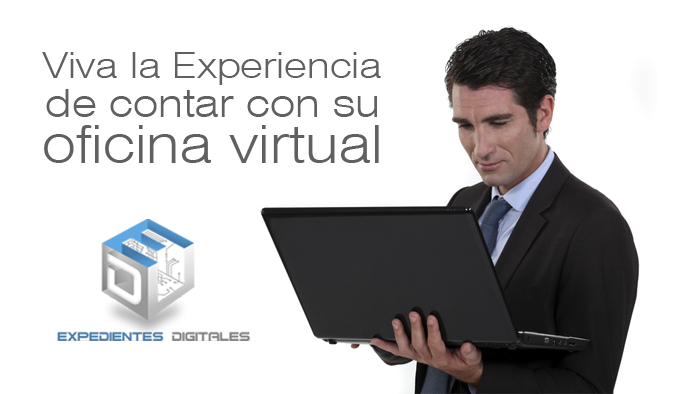
<style>
.page{position:relative;width:700px;height:394px;background:#ffffff}
.page>*{position:absolute;margin:0}
.t1{font:35.4px "Swiss721BT-LightExtended";color:#616060}
.t2{font:38.8px "Swiss721BT-LightExtended";color:#616060}
.t3{font:52px "Swiss721BT-LightExtended";color:#616060}
</style>
<div class="page">
<p class="t1" style="left:42px;top:52px;width:339px;height:33px">Viva la Experiencia</p>
<p class="t2" style="left:46px;top:89px;width:331px;height:28px">de contar con su</p>
<p class="t3" style="left:44px;top:125px;width:335px;height:38px">oficina virtual</p>
</div>
